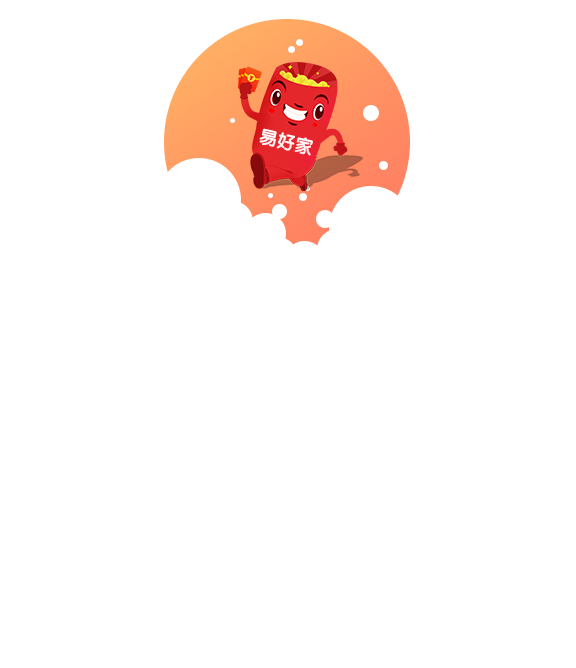
<style>
.page{position:relative;width:576px;height:668px;background:#ffffff}
.page>*{position:absolute;margin:0}
.t1{font:18.1px "FZY4JW--GB1-0";color:#fff5f5}
</style>
<div class="page">
<p class="t1" style="left:259px;top:128px;width:54px;height:28px;rotate:13deg">易好家</p>
</div>
